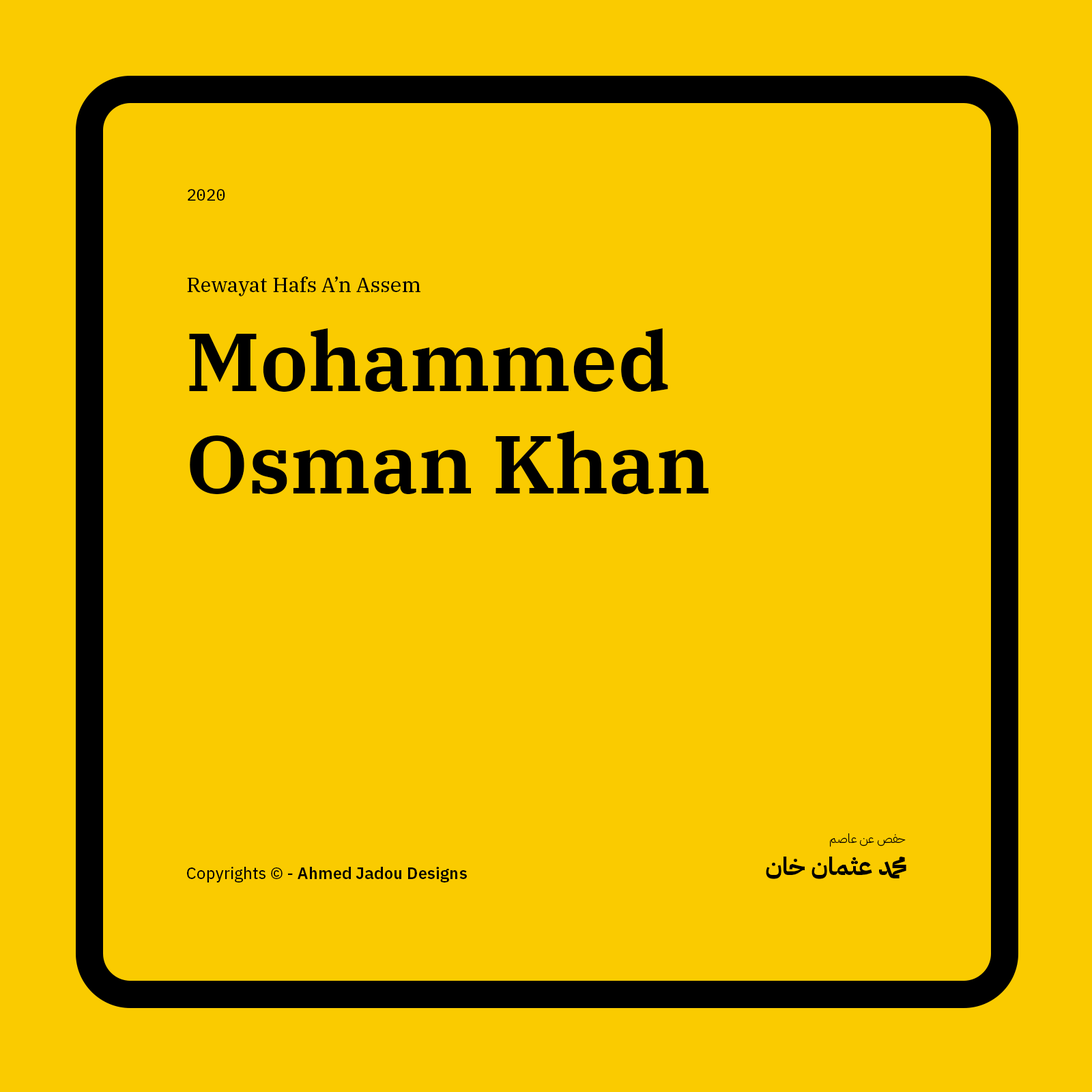
<style>
.page{position:relative;width:1092px;height:1092px;background:#facb00}
.page>*{position:absolute;margin:0}
.t1{font:16.4px "IBMPlexMono-Text";color:#000000}
.t2{font:20.5px "IBMPlexSerif-Text";color:#000000}
.t3{font:81.9px/102.7px "IBMPlexSerif-SemiBold";color:#000000}
.t4{font:12.3px "IBMPlexArabic-Light";color:#000000}
.t5{font:24.6px "IBMPlexArabic-Bold";color:#000000}
.t6{font:16.4px "IBMPlexSans-SemiBold";color:#000000}
.t7{font:16.4px "IBMPlexSans-Text";color:#000000}
</style>
<div class="page">
<p class="t1" style="left:188px;top:189px;width:37px;height:12px">2020</p>
<p class="t2" style="left:187px;top:276px;width:233px;height:20px">Rewayat Hafs A’n Assem</p>
<p class="t3" style="left:189px;top:328px;width:520px;height:166px">Mohammed Osman Khan</p>
<p class="t4" style="left:830px;top:833px;width:76px;height:14px">حفص عن عاصم</p>
<p class="t5" style="left:766px;top:857px;width:140px;height:22px">محمد عثمان خان</p>
<p class="t6" style="left:187px;top:867px;width:280px;height:15px"><span class="t7">Copyrights © - </span>Ahmed Jadou Designs</p>
</div>
